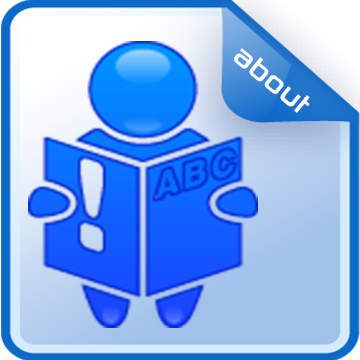
<style>
.page{position:relative;width:360px;height:360px}
.page>*{position:absolute;margin:0}
.t1{font:40px "SonySketchEF";color:#ffffff;scale:0.96 1}
</style>
<div class="page">
<p class="t1" style="left:234px;top:48px;width:76px;height:65px;rotate:39deg">about</p>
</div>
